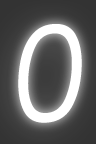
<style>
.page{position:relative;width:96px;height:144px}
.page>*{position:absolute;margin:0}
.t1{font:160px "Farsan-Regular";color:#ffffff}
</style>
<div class="page">
<p class="t1" style="left:18px;top:24px;width:64px;height:99px">0</p>
</div>
